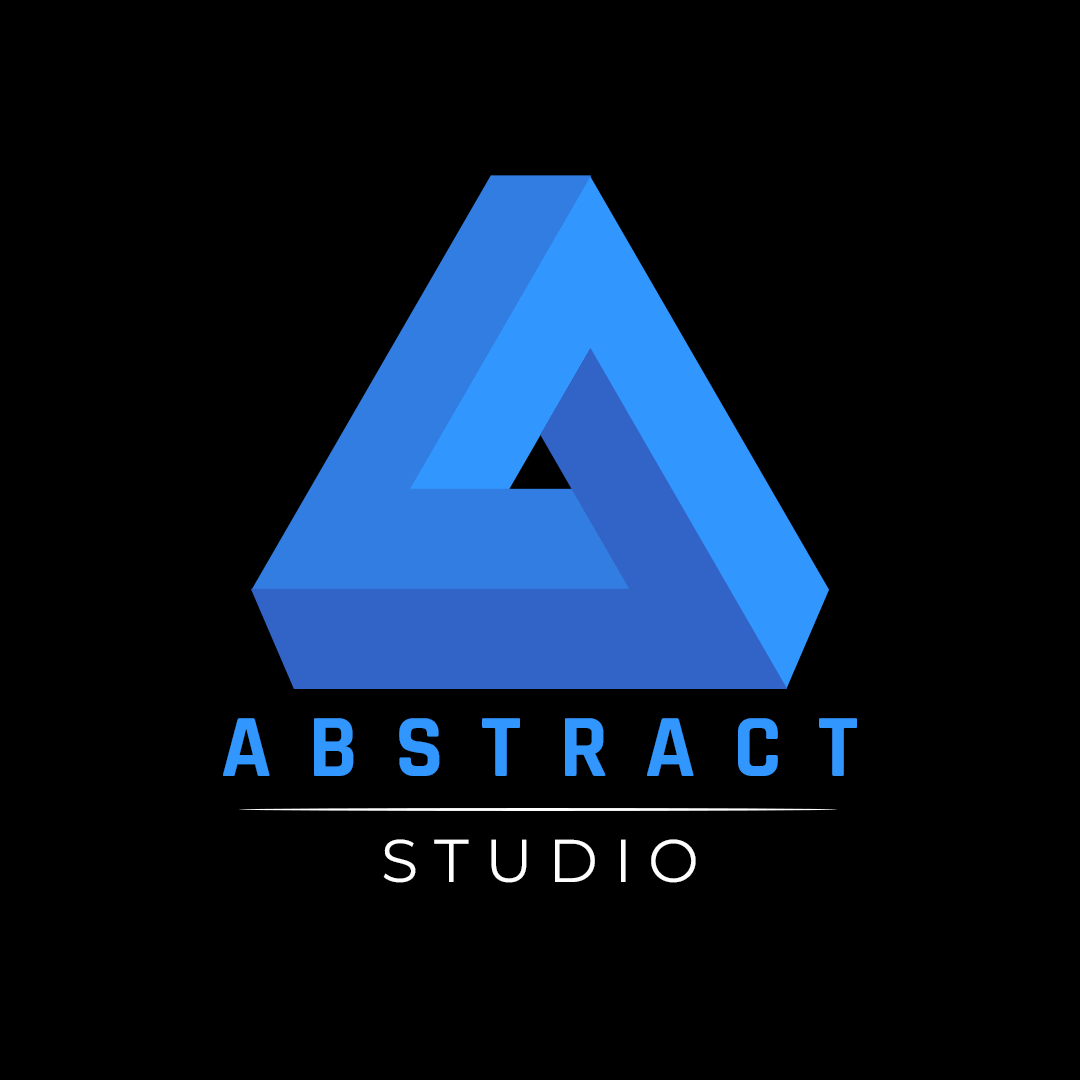
<style>
.page{position:relative;width:1080px;height:1080px;background:#000000}
.page>*{position:absolute;margin:0}
.t1{font:90px "Rajdhani-Bold";letter-spacing:-0.01em;color:#3296ff}
.t2{font:60.4px "Montserrat-Regular";color:#ffffff}
</style>
<div class="page">
<p class="t1" style="left:223px;top:718px;width:634px;height:58px">A  B  S  T  R  A  C  T</p>
<p class="t2" style="left:383px;top:839px;width:313px;height:44px">S T U D I O</p>
</div>
